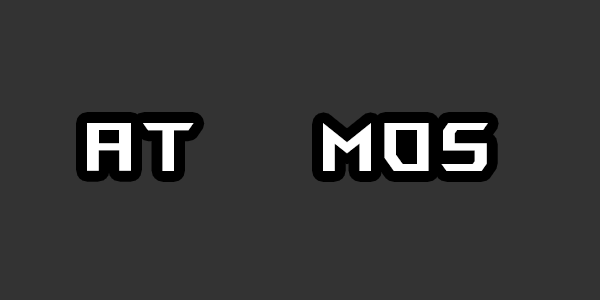
<style>
.page{position:relative;width:600px;height:300px;background:#333333}
.page>*{position:absolute;margin:0}
.t1{font:68.4px "ROGFonts-Regular";letter-spacing:0.16em;color:#ffffff;scale:0.81 1}
</style>
<div class="page">
<p class="t1" style="left:87px;top:123px;width:401px;height:48px">AT    MoS</p>
</div>
